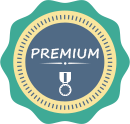
<style>
.page{position:relative;width:130px;height:124px;background:#506a85}
.page>*{position:absolute;margin:0}
.t1{font:13.2px "SegoePrint-Bold";letter-spacing:0.025em;color:#ffffff}
</style>
<div class="page">
<p class="t1" style="left:31px;top:48px;width:68px;height:11px">PREMIUM</p>
</div>
